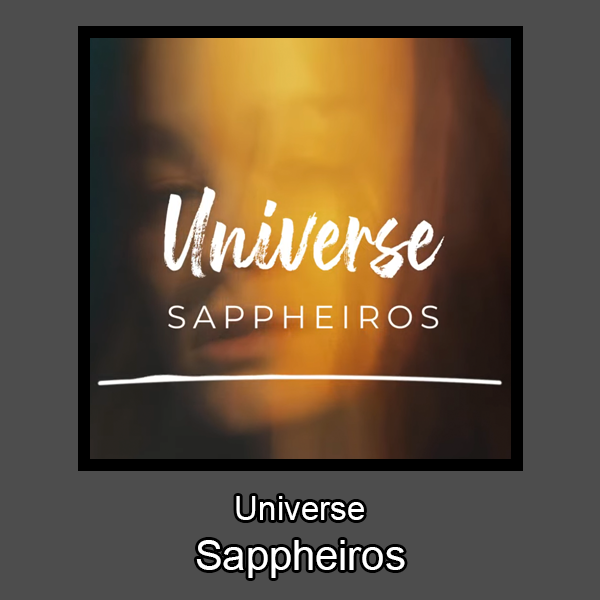
<style>
.page{position:relative;width:600px;height:600px;background:#4d4d4d}
.page>*{position:absolute;margin:0}
.t1{font:41.7px "ArialMT";color:#ffffff}
.t2{font:33.3px "ArialMT";color:#ffffff}
</style>
<div class="page">
<p class="t1" style="left:196px;top:496px;width:209px;height:82px;text-align:center"><span class="t2">Universe<br></span>Sappheiros</p>
</div>
